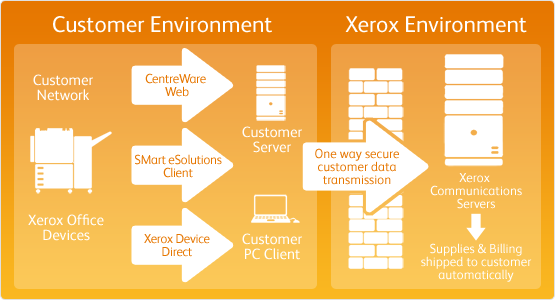
<style>
.page{position:relative;width:555px;height:300px}
.page>*{position:absolute;margin:0}
.t1{font:23px "XeroxSans";color:#ffffff}
.t2{font:15px/15px "XeroxSans";color:#ffffff}
.t3{font:13px/13px "XeroxSans";letter-spacing:-0.025em;color:#e67600}
.t4{font:13px/13px "XeroxSans";color:#e67600}
.t5{font:13px/13px "XeroxSans";color:#ffffff}
</style>
<div class="page">
<p class="t1" style="left:53px;top:16px;width:219px;height:17px">Customer Environment</p>
<p class="t1" style="left:345px;top:16px;width:182px;height:17px">Xerox Environment</p>
<p class="t2" style="left:33px;top:74px;width:60px;height:27px;text-align:center">Customer<br>Network</p>
<p class="t3" style="left:145px;top:73px;width:61px;height:24px;text-align:center">CentreWare <br>Web</p>
<p class="t2" style="left:242px;top:126px;width:60px;height:27px;text-align:center">Customer<br>Server</p>
<p class="t4" style="left:315px;top:148px;width:84px;height:37px;text-align:center">One way secure<br>customer data<br>transmission</p>
<p class="t3" style="left:135px;top:154px;width:87px;height:24px;text-align:center">SMart eSolutions<br>Client</p>
<p class="t5" style="left:430px;top:173px;width:92px;height:36px;text-align:center">Xerox <br>Communications<br>Servers</p>
<p class="t2" style="left:28px;top:214px;width:76px;height:27px;text-align:center">Xerox Office<br>Devices</p>
<p class="t2" style="left:242px;top:233px;width:60px;height:27px;text-align:center">Customer<br>PC Client</p>
<p class="t3" style="left:144px;top:234px;width:66px;height:23px;text-align:center">Xerox Device<br>Direct</p>
<p class="t5" style="left:421px;top:243px;width:111px;height:39px;text-align:center">Supplies &amp; Billing<br>shipped to customer<br>automatically</p>
</div>
